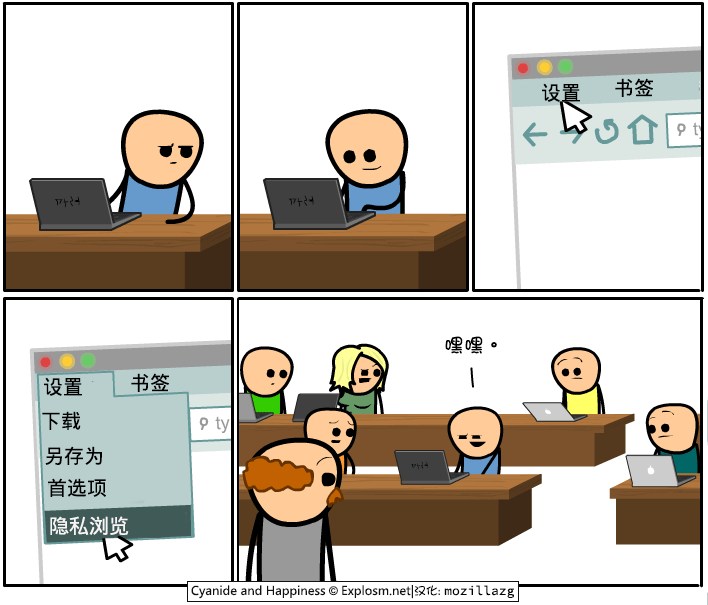
<style>
.page{position:relative;width:708px;height:605px;background:#ffffff}
.page>*{position:absolute;margin:0}
.t1{font:20px "WenQuanYiMicroHei";color:#000000}
.t2{font:20px "DFGirl";color:#000000}
.t3{font:20px "WenQuanYiMicroHei";color:#f7f5f5}
</style>
<div class="page">
<p class="t1" style="left:615px;top:78px;width:38px;height:19px">书签</p>
<p class="t1" style="left:542px;top:83px;width:38px;height:19px">设置</p>
<p class="t2" style="left:445px;top:336px;width:52px;height:18px">嘿嘿。</p>
<p class="t1" style="left:44px;top:377px;width:38px;height:19px">设置</p>
<p class="t1" style="left:131px;top:373px;width:38px;height:19px">书签</p>
<p class="t1" style="left:42px;top:411px;width:39px;height:19px">下载</p>
<p class="t1" style="left:45px;top:446px;width:57px;height:19px">另存为</p>
<p class="t1" style="left:48px;top:478px;width:58px;height:19px">首选项</p>
<p class="t3" style="left:50px;top:516px;width:79px;height:19px">隐私浏览</p>
</div>
